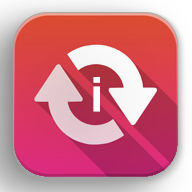
<style>
.page{position:relative;width:192px;height:192px}
.page>*{position:absolute;margin:0}
.t1{font:48px "Arial-BoldMT";color:#ffffff}
</style>
<div class="page">
<p class="t1" style="left:93px;top:77px;width:7px;height:35px">i</p>
</div>
